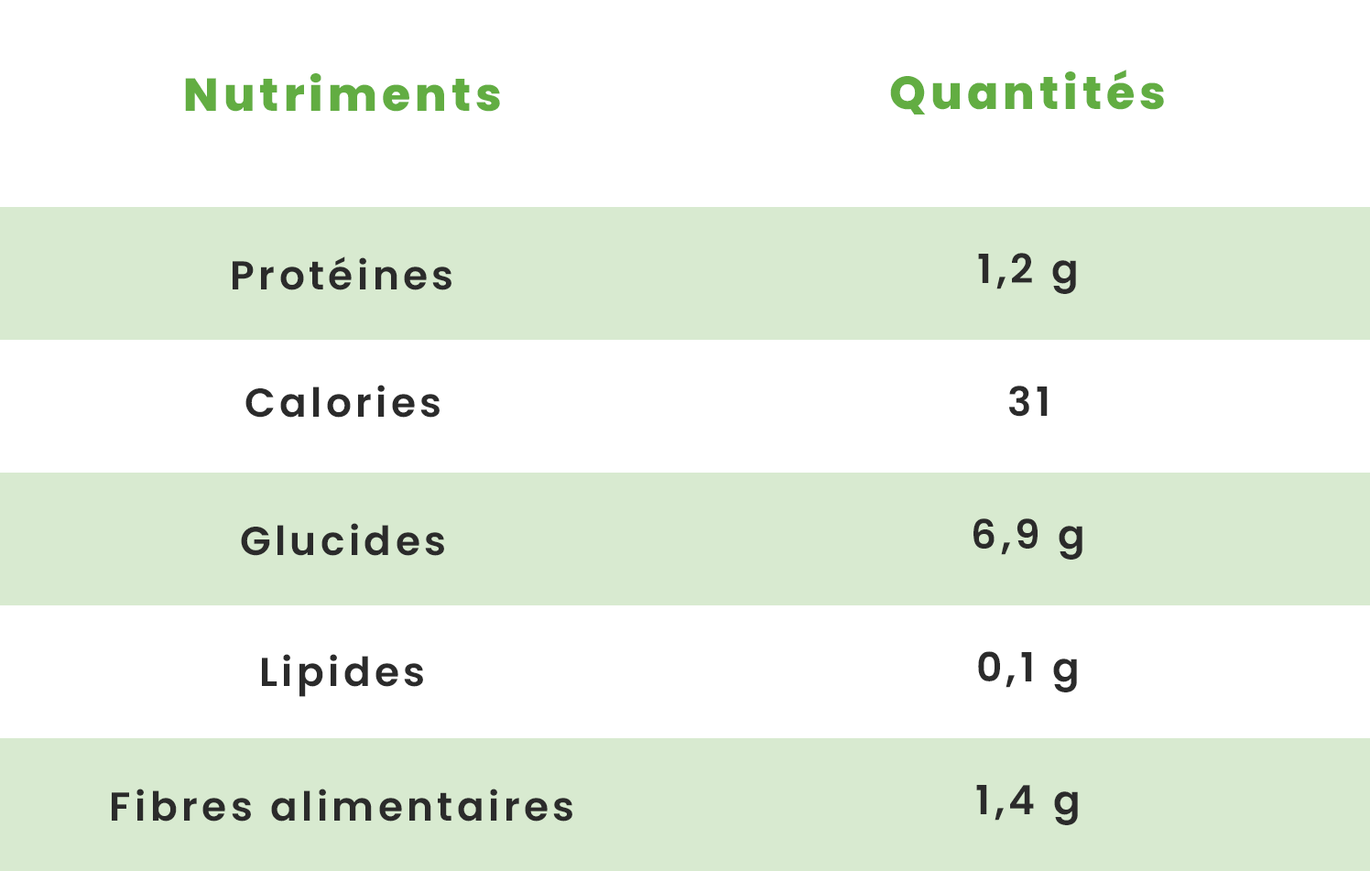
<style>
.page{position:relative;width:1370px;height:871px;background:#ffffff}
.page>*{position:absolute;margin:0}
.t1{font:46.1px "Poppins-ExtraBold";letter-spacing:0.1em;color:#62ad42}
.t2{font:40.2px "Poppins-SemiBold";letter-spacing:0.1em;color:#2b2b2b}
</style>
<div class="page">
<p class="t1" style="left:185px;top:73px;width:315px;height:39px">Nutriments</p>
<p class="t1" style="left:890px;top:70px;width:274px;height:44px">Quantités</p>
<p class="t2" style="left:233px;top:256px;width:218px;height:34px">Protéines</p>
<p class="t2" style="left:978px;top:253px;width:98px;height:41px">1,2 g</p>
<p class="t2" style="left:245px;top:385px;width:194px;height:32px">Calories</p>
<p class="t2" style="left:1009px;top:385px;width:38px;height:32px">31</p>
<p class="t2" style="left:973px;top:518px;width:109px;height:41px">6,9 g</p>
<p class="t2" style="left:241px;top:523px;width:203px;height:33px">Glucides</p>
<p class="t2" style="left:262px;top:654px;width:161px;height:43px">Lipides</p>
<p class="t2" style="left:978px;top:651px;width:99px;height:41px">0,1 g</p>
<p class="t2" style="left:976px;top:785px;width:102px;height:40px">1,4 g</p>
<p class="t2" style="left:112px;top:788px;width:460px;height:33px">Fibres alimentaires</p>
</div>
